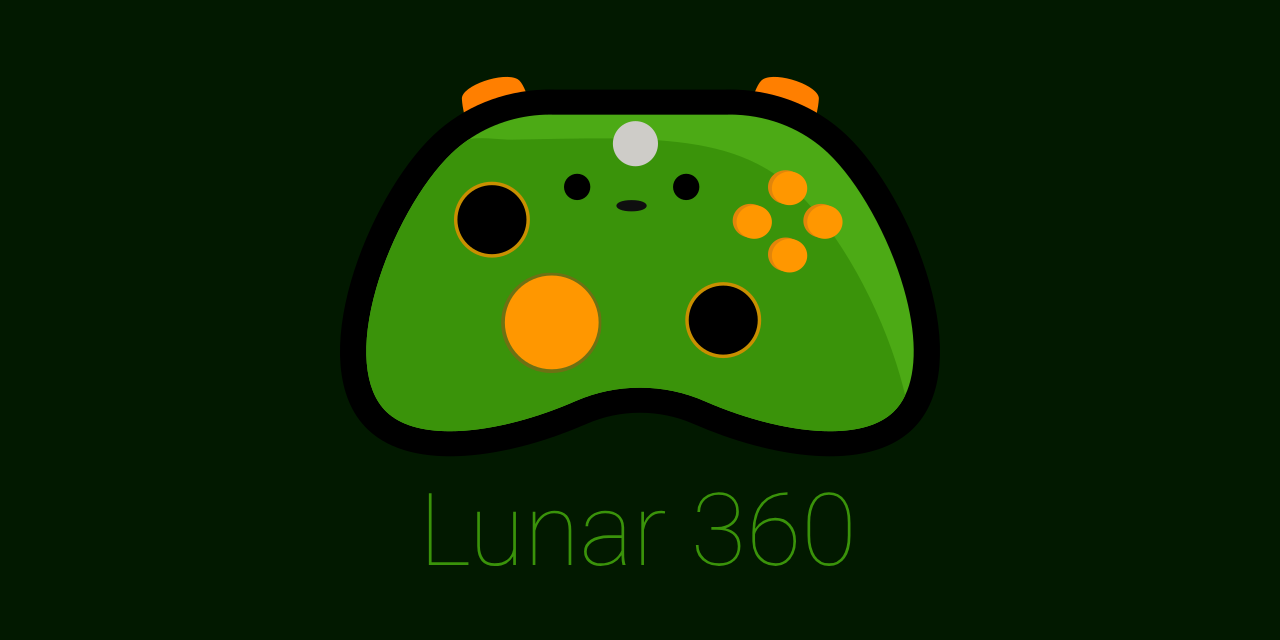
<style>
.page{position:relative;width:1280px;height:640px;background:#021900}
.page>*{position:absolute;margin:0}
.t1{font:101px "Roboto-Thin";color:#3a930a}
</style>
<div class="page">
<p class="t1" style="left:428px;top:492px;width:423px;height:74px">Lunar 360</p>
</div>
